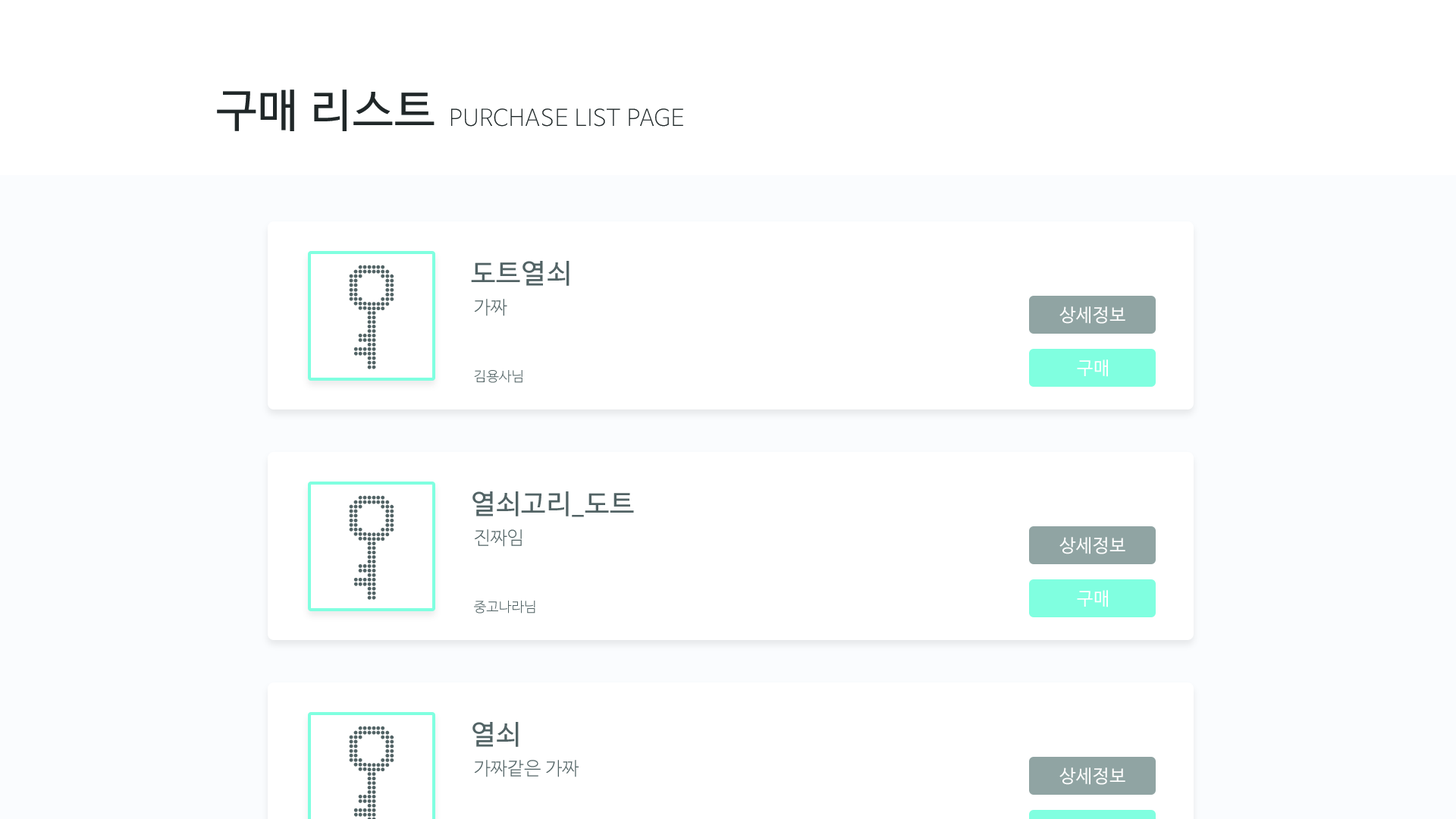
<style>
.page{position:relative;width:1456px;height:819px;background:#ffffff}
.page>*{position:absolute;margin:0}
.t1{font:45.5px "NanumBarunGothic";letter-spacing:0.025em;color:#202728}
.t2{font:22.7px "NanumBarunGothicUltraLight";letter-spacing:0.025em;color:#202728}
.t3{font:27.3px "NanumBarunGothic";letter-spacing:0.025em;color:#526364}
.t4{font:18.2px "NanumBarunGothicLight";letter-spacing:0.025em;color:#526364}
.t5{font:18.2px "NanumBarunGothic";letter-spacing:0.025em;color:#ffffff}
.t6{font:13.6px "NanumBarunGothicLight";letter-spacing:0.025em;color:#526364}
</style>
<div class="page">
<p class="t1" style="left:217px;top:89px;width:218px;height:42px">구매 리스트</p>
<p class="t2" style="left:451px;top:108px;width:232px;height:19px">PURCHASE LIST PAGE</p>
<p class="t3" style="left:471px;top:261px;width:99px;height:25px">도트열쇠</p>
<p class="t4" style="left:474px;top:299px;width:33px;height:17px">가짜</p>
<p class="t5" style="left:1059px;top:306px;width:66px;height:18px">상세정보</p>
<p class="t5" style="left:1077px;top:359px;width:31px;height:18px">구매</p>
<p class="t6" style="left:474px;top:370px;width:48px;height:13px">김용사님</p>
<p class="t3" style="left:472px;top:491px;width:162px;height:26px">열쇠고리_도트</p>
<p class="t4" style="left:474px;top:529px;width:48px;height:18px">진짜임</p>
<p class="t5" style="left:1059px;top:537px;width:66px;height:17px">상세정보</p>
<p class="t5" style="left:1077px;top:590px;width:31px;height:17px">구매</p>
<p class="t6" style="left:474px;top:601px;width:61px;height:12px">중고나라님</p>
<p class="t3" style="left:472px;top:722px;width:47px;height:25px">열쇠</p>
<p class="t4" style="left:474px;top:760px;width:105px;height:17px">가짜같은 가짜</p>
<p class="t5" style="left:1059px;top:767px;width:66px;height:18px">상세정보</p>
</div>
